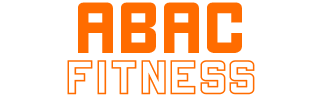
<style>
.page{position:relative;width:320px;height:100px;background:#ffffff}
.page>*{position:absolute;margin:0}
.t1{font:72px "THECHAMPRegular";color:#ff6c00}
.t2{font:48px "THECHAMPStroke";color:#ff6c00}
</style>
<div class="page">
<p class="t1" style="left:78px;top:2px;width:164px;height:51px">abac</p>
<p class="t2" style="left:67px;top:60px;width:188px;height:35px">FITNESS</p>
</div>
